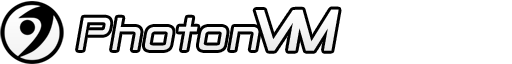
<style>
.page{position:relative;width:512px;height:64px;background:#ffffff}
.page>*{position:absolute;margin:0}
.t1{font:45px "Anita--Semi-square";letter-spacing:0.03em;color:#f5f5f5;font-style:italic}
.t2{font:45px "Anita--Semi-square";color:#f5f5f5;font-style:italic}
.t3{font:45px "Anita--Semi-square";letter-spacing:-0.15em;color:#f5f5f5;font-style:italic}
.t4{font:56px "Anita--Semi-square";letter-spacing:-0.19em;color:#ffffff;font-weight:bold;font-style:italic}
.t5{font:56px "Anita--Semi-square";letter-spacing:-0.14em;color:#ffffff;font-weight:bold;font-style:italic}
</style>
<div class="page">
<p class="t1" style="left:78px;top:17px;width:181px;height:33px">Ph<span class="t2">o</span>to<span class="t3">n</span></p>
<p class="t4" style="left:255px;top:9px;width:84px;height:42px">V<span class="t5">M</span></p>
</div>
